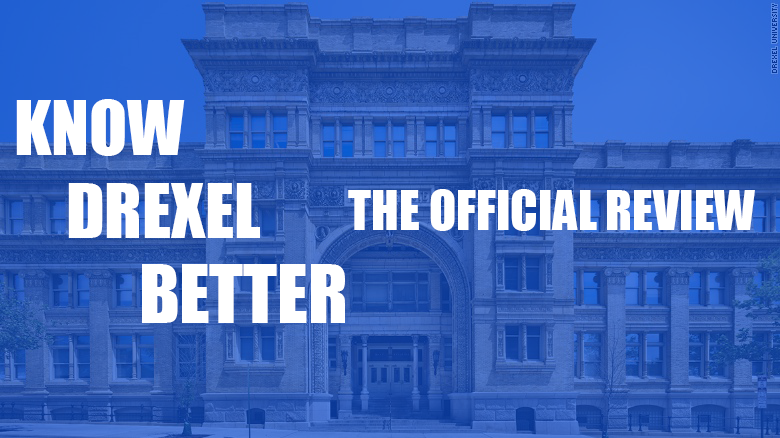
<style>
.page{position:relative;width:780px;height:438px}
.page>*{position:absolute;margin:0}
.t1{font:69.6px "Impact";color:#ffffff}
.t2{font:70px "Impact";color:#ffffff}
.t3{font:50px "Impact";color:#ffffff}
.t4{font:74px "Impact";color:#ffffff}
</style>
<div class="page">
<p class="t1" style="left:16px;top:99px;width:169px;height:57px">KNOW</p>
<p class="t2" style="left:68px;top:183px;width:192px;height:55px">DREXEL</p>
<p class="t3" style="left:348px;top:189px;width:407px;height:42px">THE OFFICIAL REVIEW</p>
<p class="t4" style="left:142px;top:264px;width:203px;height:59px">BETTER</p>
</div>
